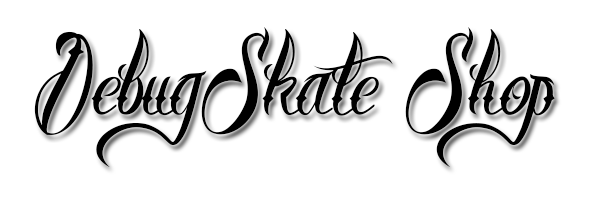
<style>
.page{position:relative;width:600px;height:200px;background:#ffffff}
.page>*{position:absolute;margin:0}
.t1{font:120px "BrotherTattoo";color:#000000}
</style>
<div class="page">
<p class="t1" style="left:34px;top:27px;width:521px;height:140px">DebugSkate Shop</p>
</div>
